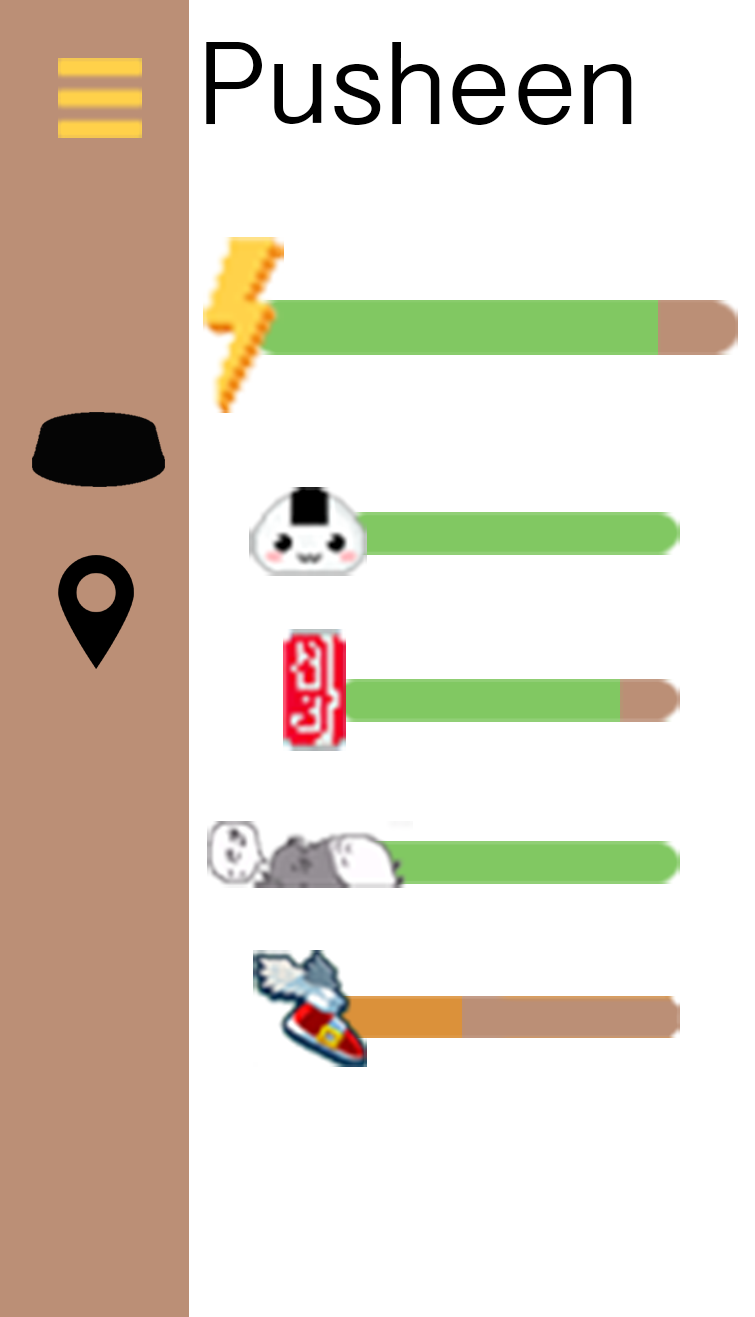
<style>
.page{position:relative;width:755px;height:1317px;background:#ffffff}
.page>*{position:absolute;margin:0}
.t1{font:104.2px "BanglaSangamMN";color:#000000}
</style>
<div class="page">
<p class="t1" style="left:206px;top:42px;width:426px;height:83px">Pusheen</p>
</div>
